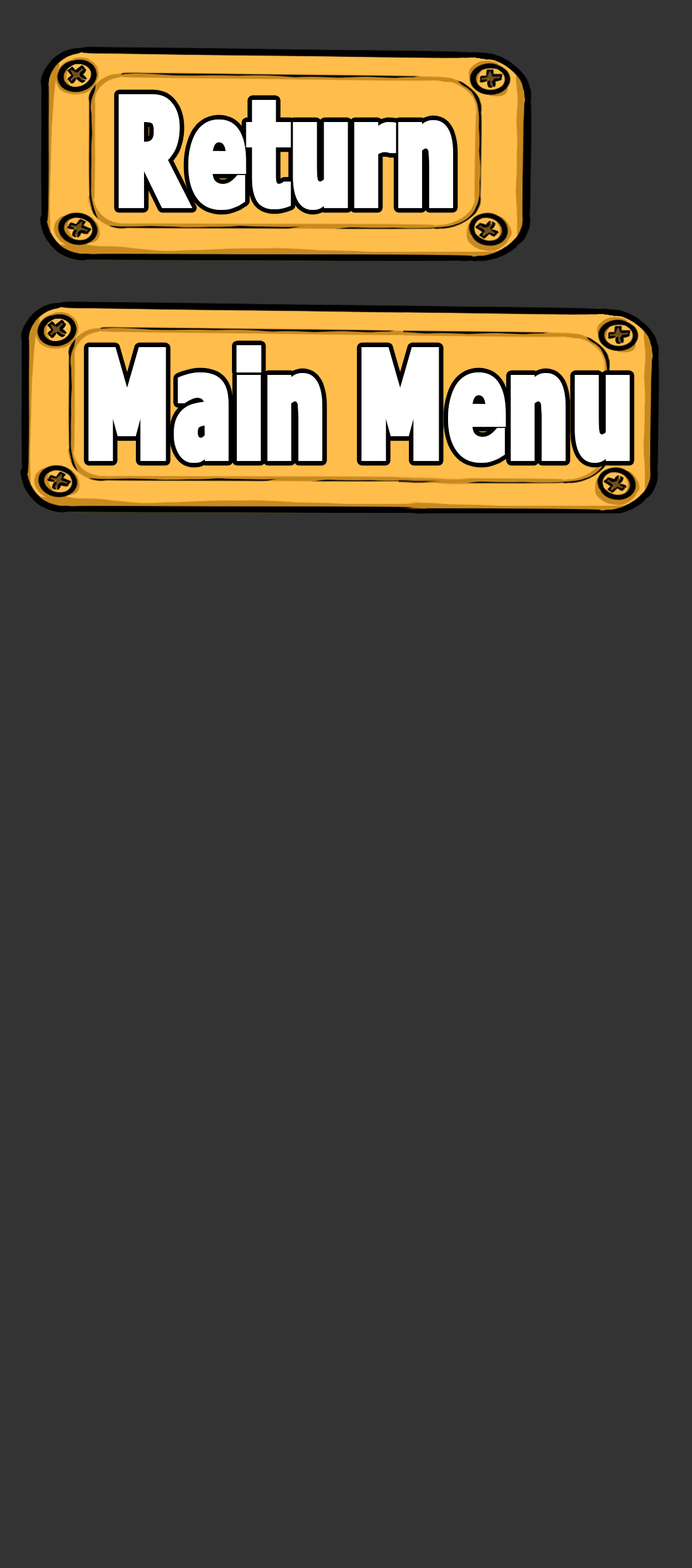
<style>
.page{position:relative;width:692px;height:1568px;background:#333333}
.page>*{position:absolute;margin:0}
.t1{font:157.1px "Fava-Black";color:#ffffff;scale:0.66 1}
</style>
<div class="page">
<p class="t1" style="left:118px;top:94px;width:335px;height:116px">Return</p>
<p class="t1" style="left:89px;top:345px;width:541px;height:118px">Main Menu</p>
</div>
